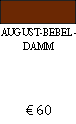
<style>
.page{position:relative;width:76px;height:124px;background:#ffffff}
.page>*{position:absolute;margin:0}
.t1{font:12px "AdobeDevanagari-Regular";color:#000000;scale:0.9 1}
.t2{font:14px "MyriadPro-Regular";color:#000000}
</style>
<div class="page">
<p class="t1" style="left:1px;top:28px;width:75px;height:22px;text-align:center">AUGUST-BEBEL-<br>DAMM</p>
<p class="t2" style="left:26px;top:105px;width:25px;height:10px">€ 60</p>
</div>
